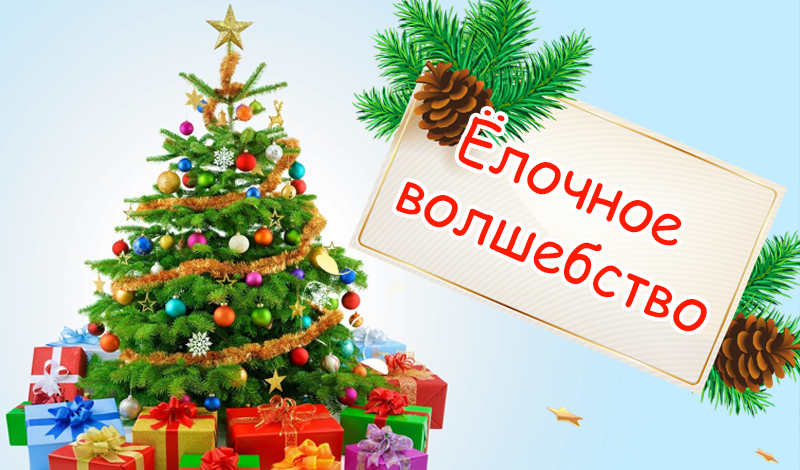
<style>
.page{position:relative;width:800px;height:470px}
.page>*{position:absolute;margin:0}
.t1{font:58.9px "ComicSansMS";color:#ff1a00}
</style>
<div class="page">
<p class="t1" style="left:396px;top:110px;width:311px;height:222px;text-align:center;rotate:23deg">Ёлочное <br>волшебство</p>
</div>
